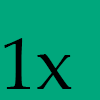
<style>
.page{position:relative;width:100px;height:100px;background:#00a77c}
.page>*{position:absolute;margin:0}
.t1{font:72px "Palatino-Roman";color:#000000}
</style>
<div class="page">
<p class="t1" style="left:4px;top:38px;width:68px;height:51px">1x</p>
</div>
